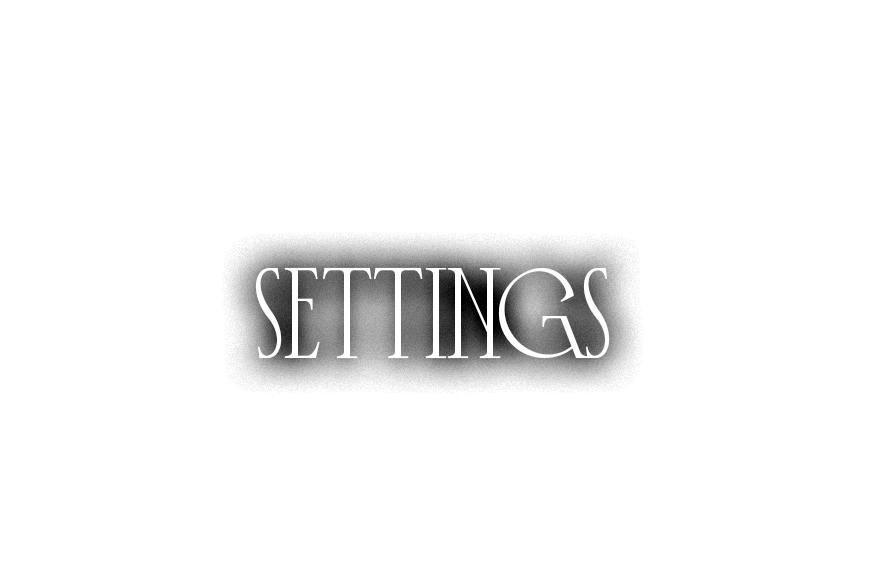
<style>
.page{position:relative;width:886px;height:580px;background:#ffffff}
.page>*{position:absolute;margin:0}
.t1{font:125px "Cyrano-DEMO";color:#ffffff}
</style>
<div class="page">
<p class="t1" style="left:255px;top:267px;width:355px;height:92px">settings</p>
</div>
